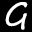
<style>
.page{position:relative;width:32px;height:32px;background:#000000}
.page>*{position:absolute;margin:0}
.t1{font:32px "SegoePrint";color:#ffffff}
</style>
<div class="page">
<p class="t1" style="left:5px;top:2px;width:23px;height:28px">G</p>
</div>
